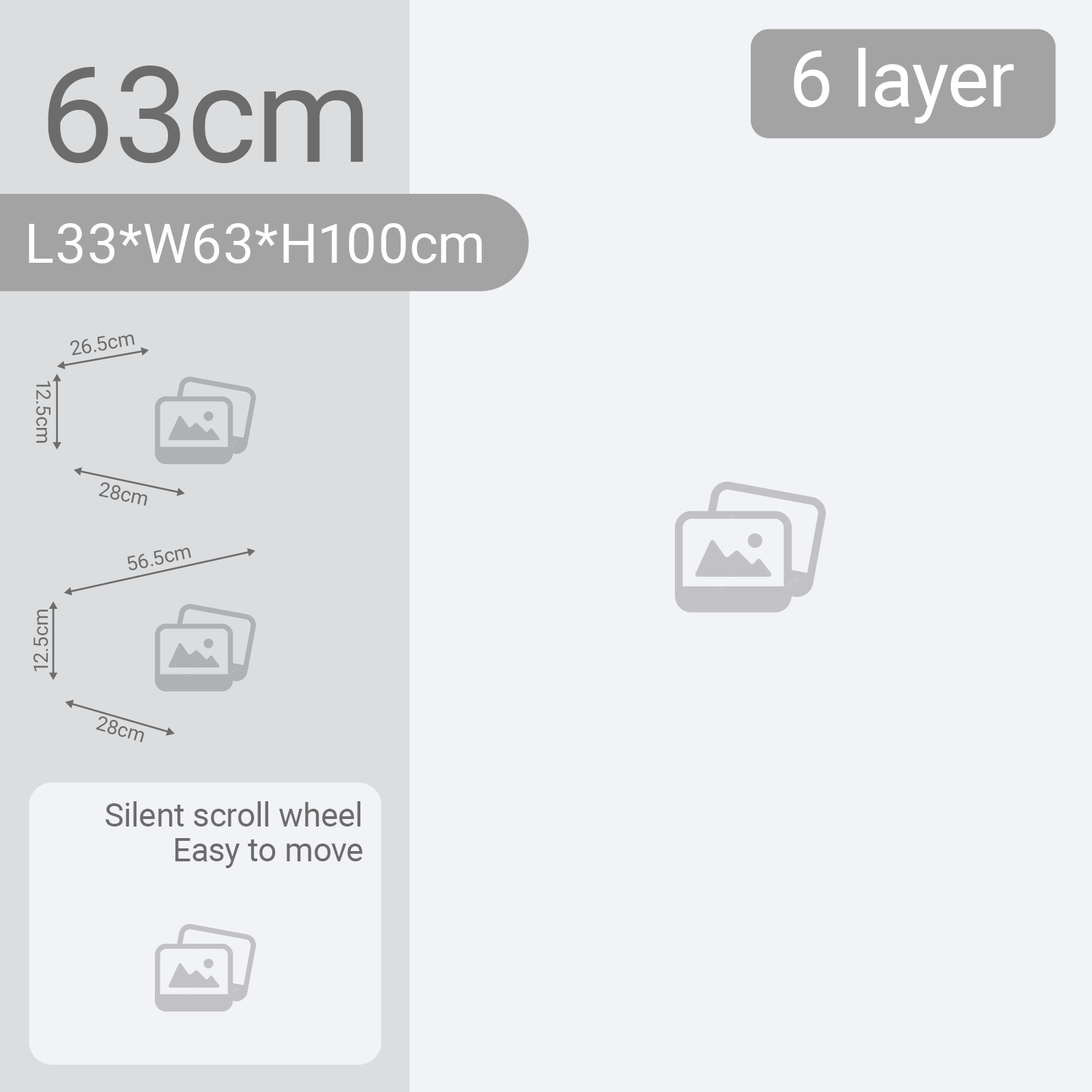
<style>
.page{position:relative;width:1092px;height:1092px;background:#f2f3f6}
.page>*{position:absolute;margin:0}
.t1{font:78.3px "Roboto-Regular";color:#ffffff}
.t2{font:132.9px "Roboto-Regular";color:#6c6c6c}
.t3{font:54.6px "Roboto-Regular";color:#ffffff;text-transform:uppercase}
.t4{font:54.6px "Roboto-Regular";color:#ffffff}
.t5{font:20px "Roboto-Regular";color:#6c6c6c}
.t6{font:32.8px/34.6px "Roboto-Regular";color:#6c6c6c}
</style>
<div class="page">
<p class="t1" style="left:794px;top:48px;width:220px;height:76px">6 layer</p>
<p class="t2" style="left:48px;top:66px;width:315px;height:97px">63cm</p>
<p class="t3" style="left:29px;top:223px;width:453px;height:40px">l33*w63*h100<span class="t4">cm</span></p>
<p class="t5" style="left:70px;top:334px;width:65px;height:22px;rotate:-10deg">26.5cm</p>
<p class="t5" style="left:36px;top:381px;width:15px;height:62px;rotate:90deg">12.5cm</p>
<p class="t5" style="left:98px;top:482px;width:49px;height:24px;rotate:12deg">28cm</p>
<p class="t5" style="left:128px;top:547px;width:63px;height:24px;rotate:-12deg">56.5cm</p>
<p class="t5" style="left:33px;top:609px;width:15px;height:63px;rotate:-90deg">12.5cm</p>
<p class="t5" style="left:96px;top:716px;width:48px;height:27px;rotate:16deg">28cm</p>
<p class="t6" style="left:105px;top:801px;width:257px;height:67px;text-align:right">Silent scroll wheel<br>Easy to move</p>
</div>
